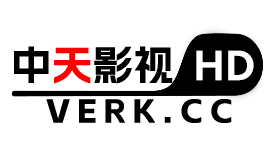
<style>
.page{position:relative;width:276px;height:159px;background:#ffffff}
.page>*{position:absolute;margin:0}
.t1{font:40px "AlimamaShuHeiTi-Bold";letter-spacing:0.02em;color:#000000;text-transform:uppercase}
.t2{font:40px "AlimamaShuHeiTi-Bold";letter-spacing:0.02em;color:#ff0000;text-transform:uppercase}
.t3{font:40px "HarmonyOS_Sans_SC_Bold";letter-spacing:0.02em;color:#ffffff;text-transform:uppercase}
.t4{font:33px "AlimamaShuHeiTi-Bold";letter-spacing:0.22em;color:#000000;text-transform:uppercase}
</style>
<div class="page">
<p class="t1" style="left:14px;top:46px;width:159px;height:38px">中<span class="t2">天</span>影视</p>
<p class="t3" style="left:196px;top:50px;width:58px;height:31px">HD</p>
<p class="t4" style="left:46px;top:99px;width:186px;height:24px">VERK.CC</p>
</div>
